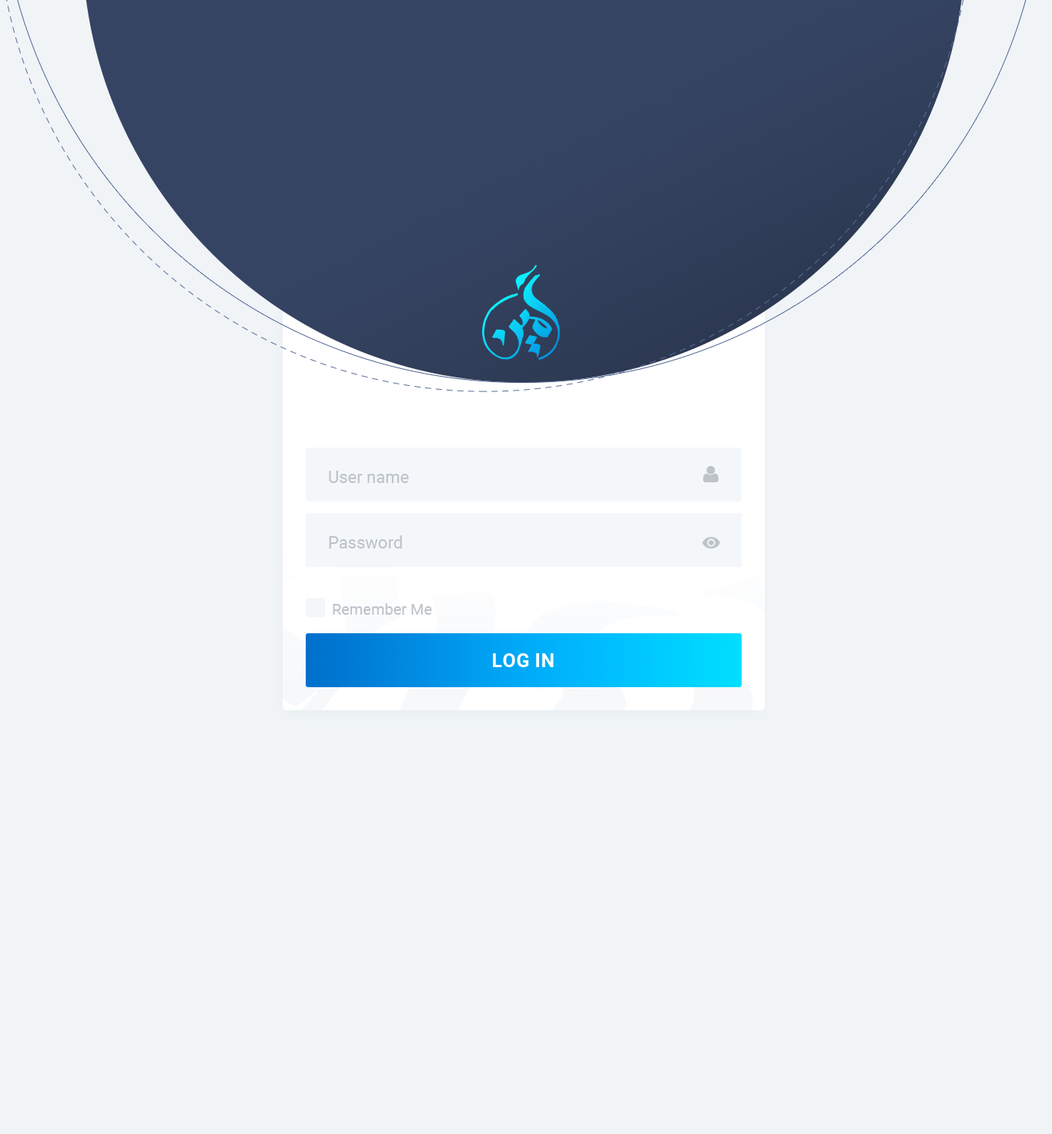
<style>
.page{position:relative;width:1052px;height:1134px;background:#f0f4f7}
.page>*{position:absolute;margin:0}
.t1{font:16.9px "Roboto-Regular";color:#bdc3c8}
.t2{font:15.4px "Roboto-Regular";color:#bdc3c8}
.t3{font:19.3px "Roboto-Bold";color:#feffff;text-transform:uppercase}
</style>
<div class="page">
<p class="t1" style="left:329px;top:471px;width:80px;height:12px">User name</p>
<p class="t1" style="left:329px;top:535px;width:73px;height:13px">Password</p>
<p class="t2" style="left:333px;top:603px;width:99px;height:12px">Remember Me</p>
<p class="t3" style="left:493px;top:653px;width:61px;height:14px">Log In</p>
</div>
